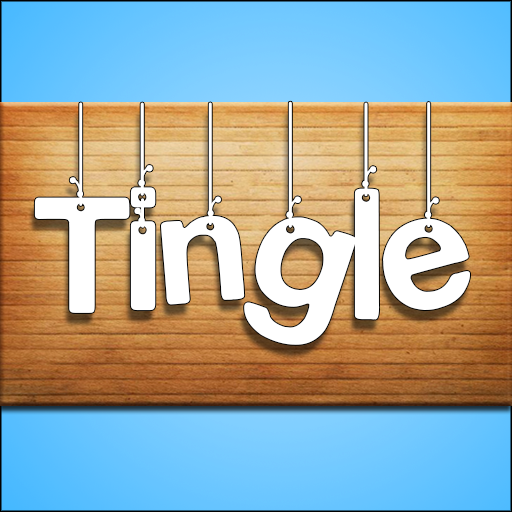
<style>
.page{position:relative;width:512px;height:512px}
.page>*{position:absolute;margin:0}
.t1{font:192.4px "HangingLetters";color:#ffffff}
</style>
<div class="page">
<p class="t1" style="left:34px;top:101px;width:436px;height:244px">Tingle</p>
</div>
